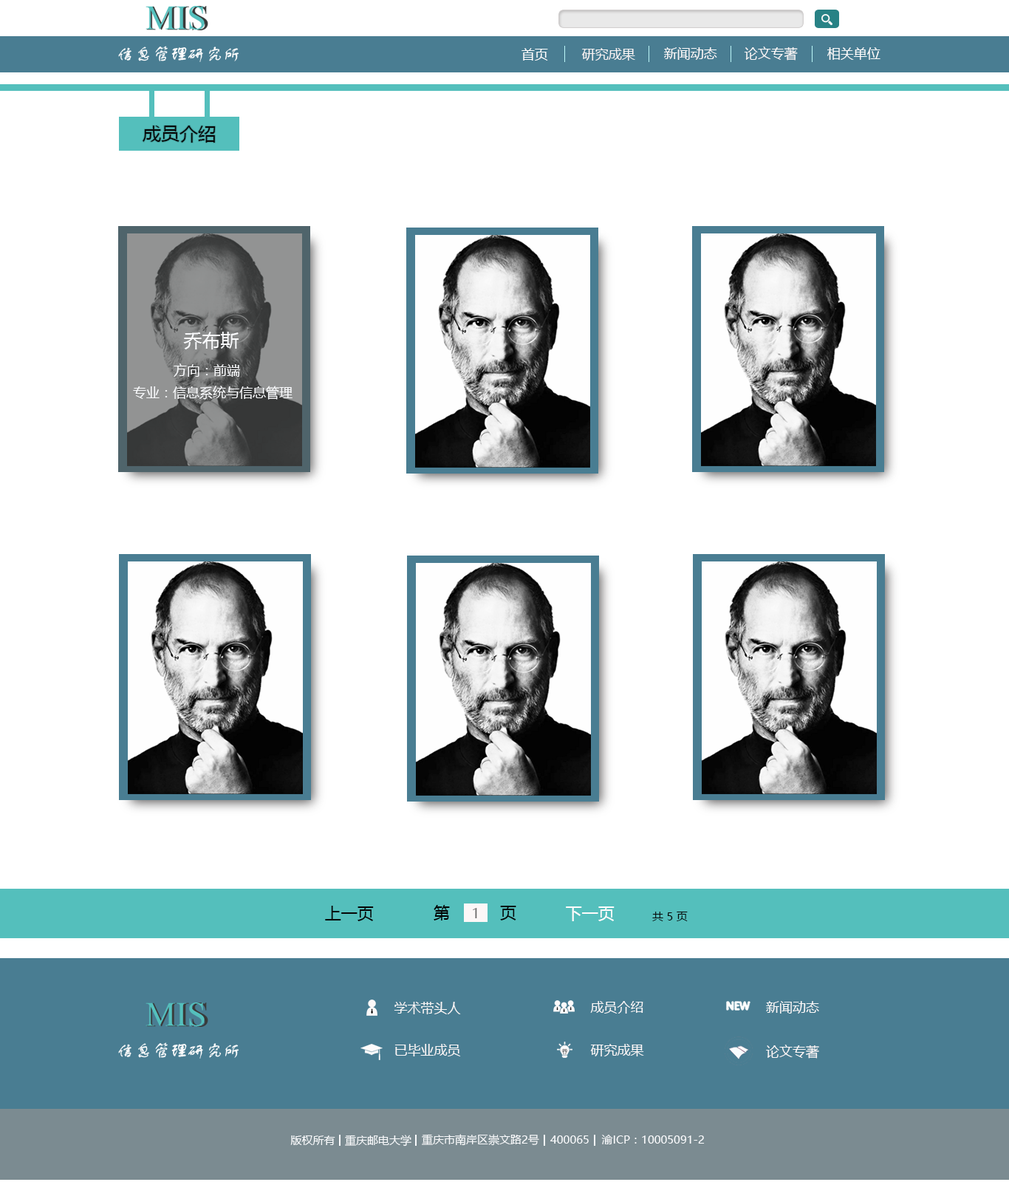
<style>
.page{position:relative;width:1009px;height:1182px;background:#ffffff}
.page>*{position:absolute;margin:0}
.t1{font:13.3px "MicrosoftYaHei";color:#fefefe}
.t2{font:13.3px "MicrosoftYaHei";color:#f8f4f4}
.t3{font:13.3px "MicrosoftYaHei";color:#fefafa}
.t4{font:13.3px "MicrosoftYaHei";color:#fcf9f9}
.t5{font:13.3px "MicrosoftYaHei";color:#fdfcfc}
.t6{font:18.5px "MicrosoftYaHei";color:#060606}
.t7{font:18.5px "MicrosoftYaHei";color:#f9fafc}
.t8{font:13.3px "MicrosoftYaHei";color:#f9fafc}
.t9{font:16.3px "MicrosoftYaHei";color:#060606}
.t10{font:16.3px "MicrosoftYaHei";color:#020202}
.t11{font:13.3px "MicrosoftYaHei";color:#686767}
.t12{font:16.3px "MicrosoftYaHei";color:#f9fafc}
.t13{font:11.1px "MicrosoftYaHei";color:#060606}
.t14{font:13.3px "MicrosoftYaHei";color:#fbf8f8}
.t15{font:13.3px "MicrosoftYaHei";color:#fcfafa}
.t16{font:13.3px "MicrosoftYaHei";color:#fdf8f8}
.t17{font:11.1px "MicrosoftYaHei";color:#f9fafc}
</style>
<div class="page">
<p class="t1" style="left:521px;top:48px;width:27px;height:13px">首页</p>
<p class="t2" style="left:581px;top:48px;width:54px;height:13px">研究成果</p>
<p class="t3" style="left:664px;top:47px;width:53px;height:13px">新闻动态</p>
<p class="t4" style="left:744px;top:47px;width:54px;height:14px">论文专著</p>
<p class="t5" style="left:827px;top:47px;width:53px;height:13px">相关单位</p>
<p class="t6" style="left:143px;top:126px;width:73px;height:17px">成员介绍</p>
<p class="t7" style="left:183px;top:332px;width:56px;height:17px">乔布斯</p>
<p class="t8" style="left:174px;top:363px;width:66px;height:14px">方向：前端</p>
<p class="t8" style="left:133px;top:386px;width:160px;height:14px">专业：信息系统与信息管理</p>
<p class="t9" style="left:325px;top:906px;width:49px;height:15px">上一页</p>
<p class="t10" style="left:434px;top:905px;width:16px;height:15px">第</p>
<p class="t10" style="left:500px;top:906px;width:16px;height:14px">页</p>
<p class="t11" style="left:473px;top:908px;width:4px;height:10px">1</p>
<p class="t12" style="left:566px;top:906px;width:49px;height:15px">下一页</p>
<p class="t13" style="left:652px;top:911px;width:36px;height:10px">共 5 页</p>
<p class="t14" style="left:394px;top:1002px;width:67px;height:12px">学术带头人</p>
<p class="t14" style="left:590px;top:1001px;width:53px;height:12px">成员介绍</p>
<p class="t15" style="left:766px;top:1001px;width:53px;height:12px">新闻动态</p>
<p class="t14" style="left:394px;top:1044px;width:67px;height:12px">已毕业成员</p>
<p class="t14" style="left:590px;top:1044px;width:54px;height:12px">研究成果</p>
<p class="t16" style="left:766px;top:1044px;width:53px;height:14px">论文专著</p>
<p class="t17" style="left:422px;top:1134px;width:117px;height:12px">重庆市南岸区崇文路2号</p>
<p class="t17" style="left:290px;top:1135px;width:45px;height:10px">版权所有</p>
<p class="t17" style="left:345px;top:1135px;width:66px;height:11px">重庆邮电大学</p>
<p class="t17" style="left:550px;top:1135px;width:39px;height:8px">400065</p>
<p class="t17" style="left:601px;top:1135px;width:104px;height:9px">渝ICP：10005091-2</p>
</div>
